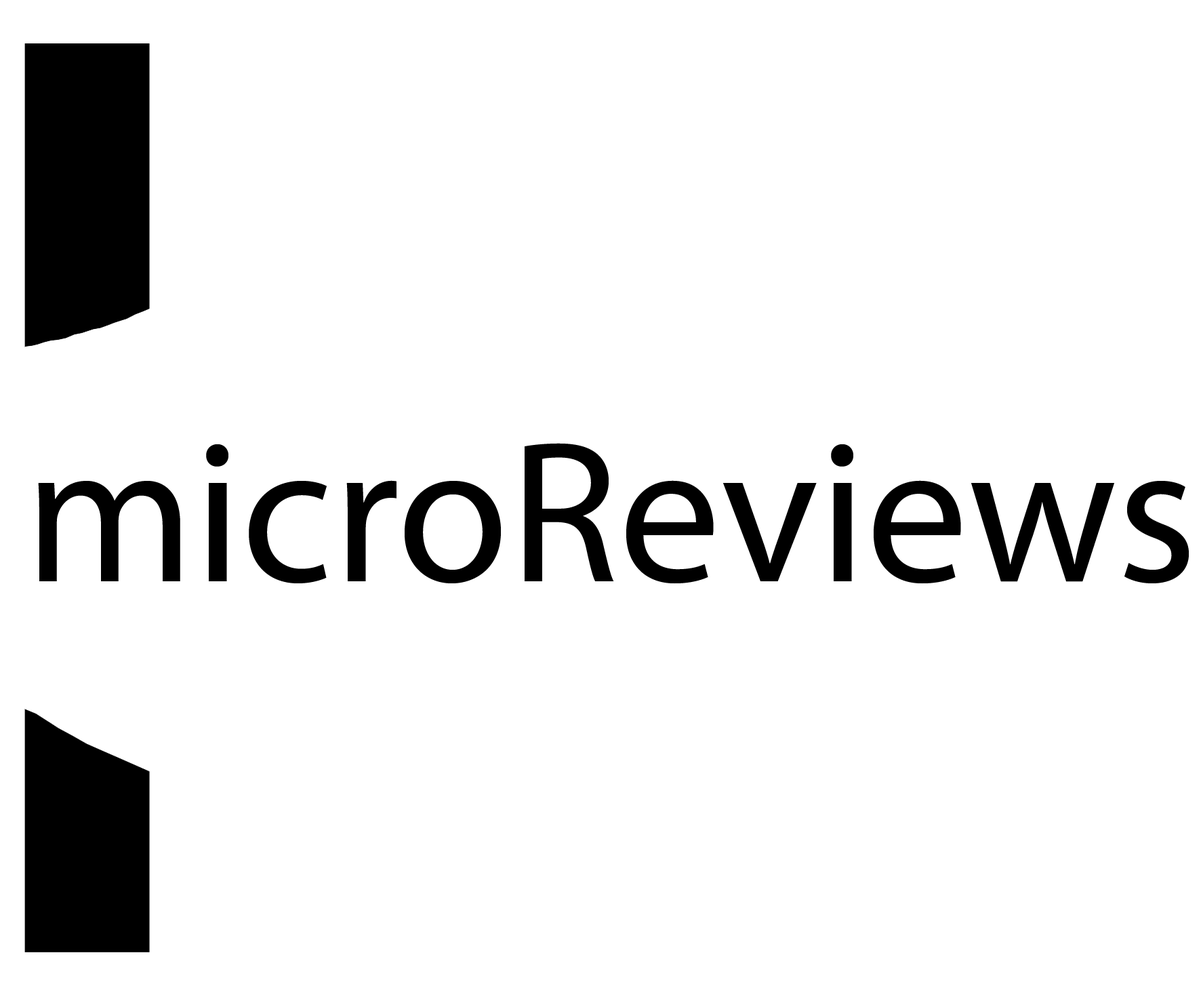
<style>
.page{position:relative;width:1201px;height:993px;background:#ffffff}
.page>*{position:absolute;margin:0}
.t1{font:203.4px "MyriadPro-Regular";color:#000000}
</style>
<div class="page">
<p class="t1" style="left:38px;top:443px;width:1151px;height:141px">microReviews</p>
</div>
